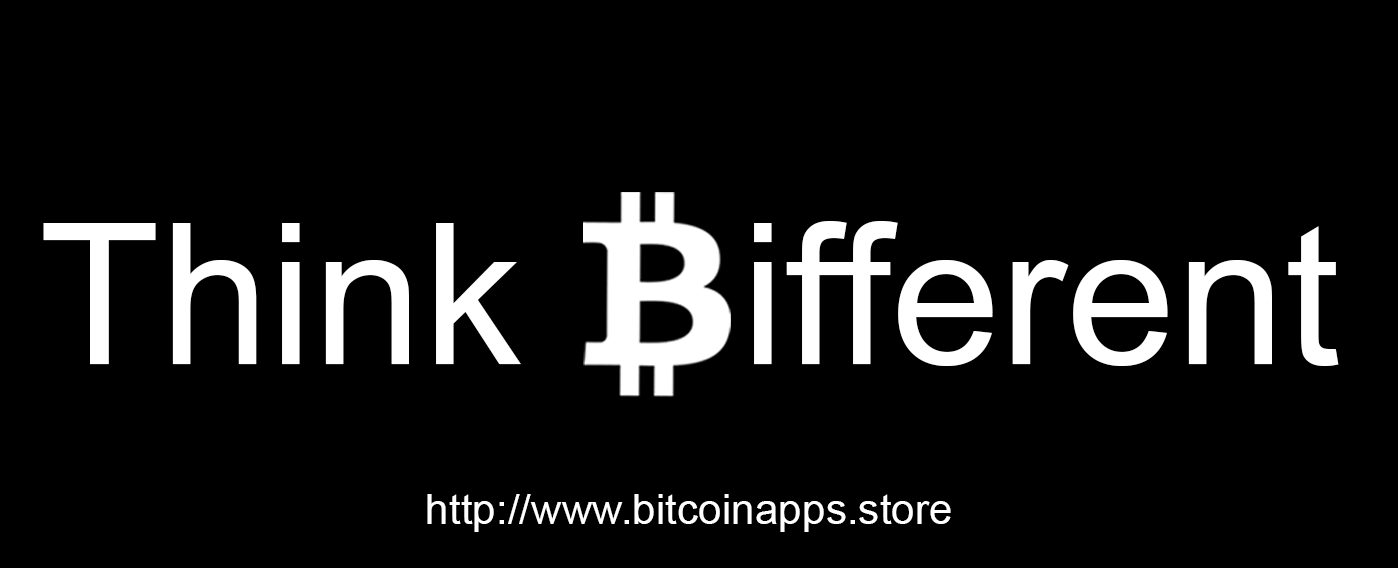
<style>
.page{position:relative;width:1398px;height:568px;background:#000000}
.page>*{position:absolute;margin:0}
.t1{font:197.3px "ArialMT";color:#ffffff}
.t2{font:42.4px "ArialMT";color:#ffffff}
</style>
<div class="page">
<p class="t1" style="left:43px;top:221px;width:1296px;height:145px">Think    ifferent</p>
<p class="t2" style="left:427px;top:494px;width:524px;height:38px">http://www.bitcoinapps.store</p>
</div>
